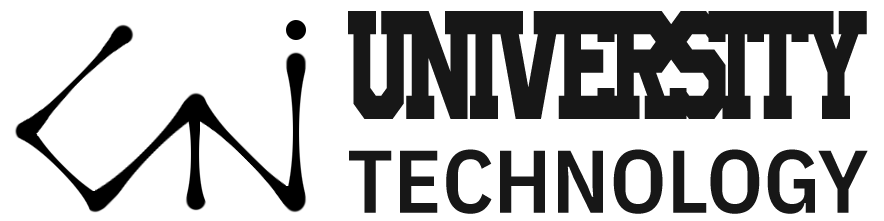
<style>
.page{position:relative;width:884px;height:221px;background:#ffffff}
.page>*{position:absolute;margin:0}
.t1{font:108px "UniversityRegular";letter-spacing:-0.108em;color:#171717;text-transform:uppercase;scale:0.72 1}
.t2{font:89px "IBMPlexSansCond-SemiBold";color:#171717;text-transform:uppercase}
</style>
<div class="page">
<p class="t1" style="left:348px;top:11px;width:519px;height:108px">UNIVERSITY</p>
<p class="t2" style="left:349px;top:149px;width:519px;height:65px">TECHNOLOGY</p>
</div>
